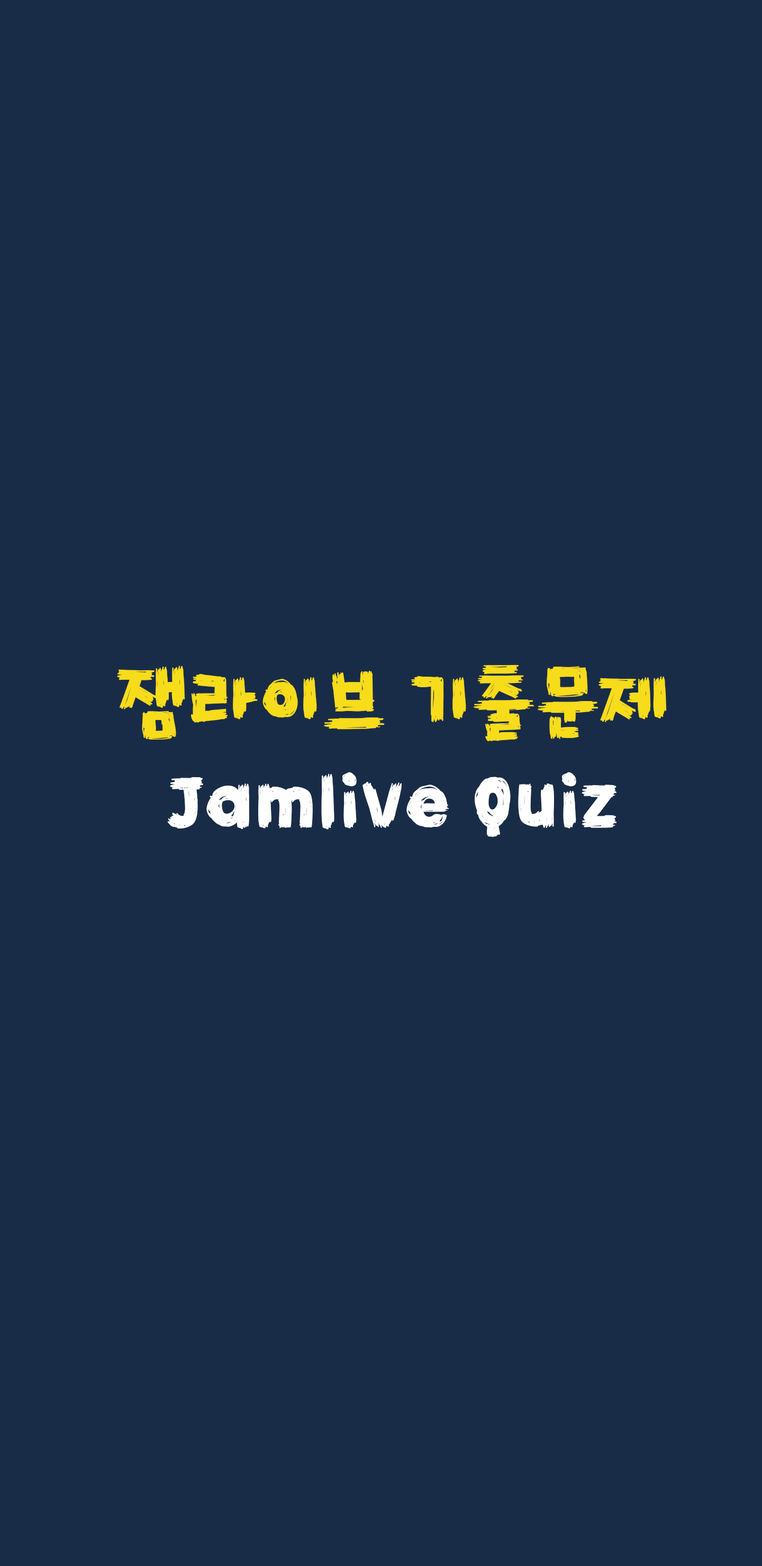
<style>
.page{position:relative;width:762px;height:1566px;background:#192c47}
.page>*{position:absolute;margin:0}
.t1{font:77.6px "TTYeonpilsketchR";color:#f7dc1b}
.t2{font:74.4px "TTYeonpilsketchR";color:#ffffff}
</style>
<div class="page">
<p class="t1" style="left:117px;top:664px;width:549px;height:77px">잼라이브 기출문제</p>
<p class="t2" style="left:167px;top:772px;width:449px;height:65px">Jamlive Quiz</p>
</div>
